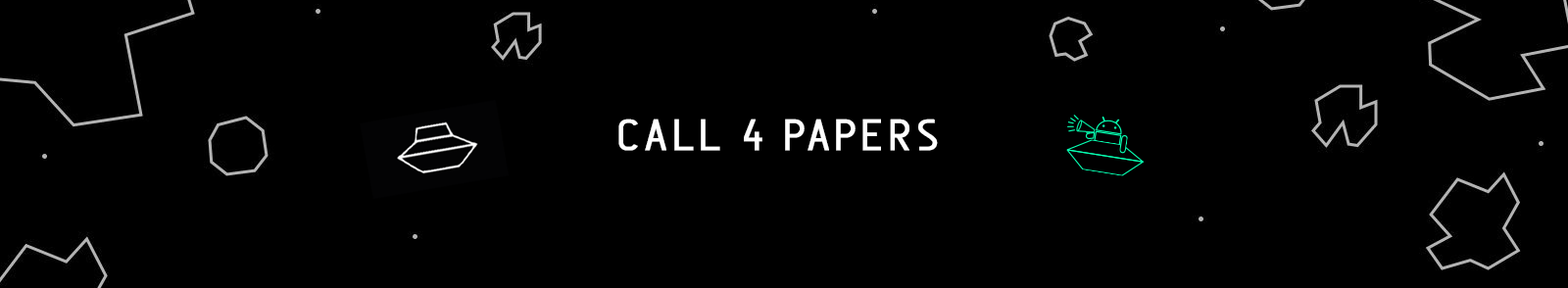
<style>
.page{position:relative;width:1568px;height:288px;background:#000000}
.page>*{position:absolute;margin:0}
.t1{font:43.4px "Anson-Regular";letter-spacing:0.1em;color:#ffffff;font-weight:bold}
</style>
<div class="page">
<p class="t1" style="left:618px;top:119px;width:320px;height:32px">CALL 4 PAPERS</p>
</div>
